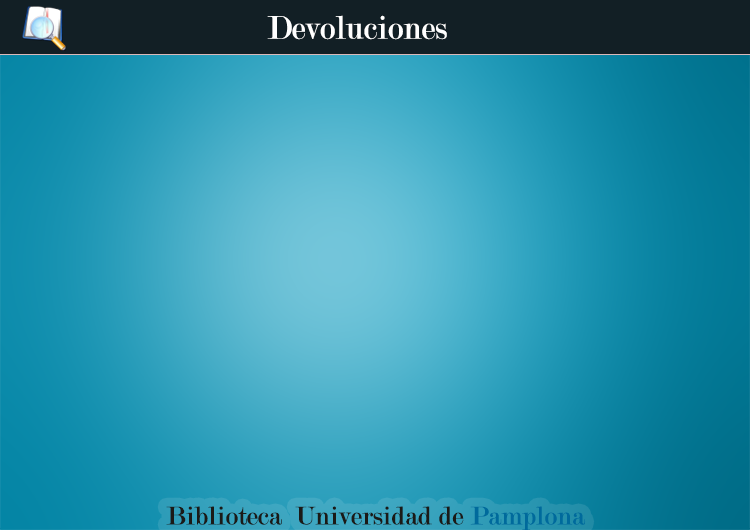
<style>
.page{position:relative;width:750px;height:530px}
.page>*{position:absolute;margin:0}
.t1{font:34.9px "Modern-Regular";color:#ffffff}
.t2{font:27.1px "Modern-Regular";color:#1b1a17}
.t3{font:27.1px "Modern-Regular";color:#006a9c}
</style>
<div class="page">
<p class="t1" style="left:267px;top:15px;width:180px;height:25px">Devoluciones</p>
<p class="t2" style="left:166px;top:506px;width:420px;height:25px">Biblioteca  Universidad de <span class="t3">Pamplona</span></p>
</div>
